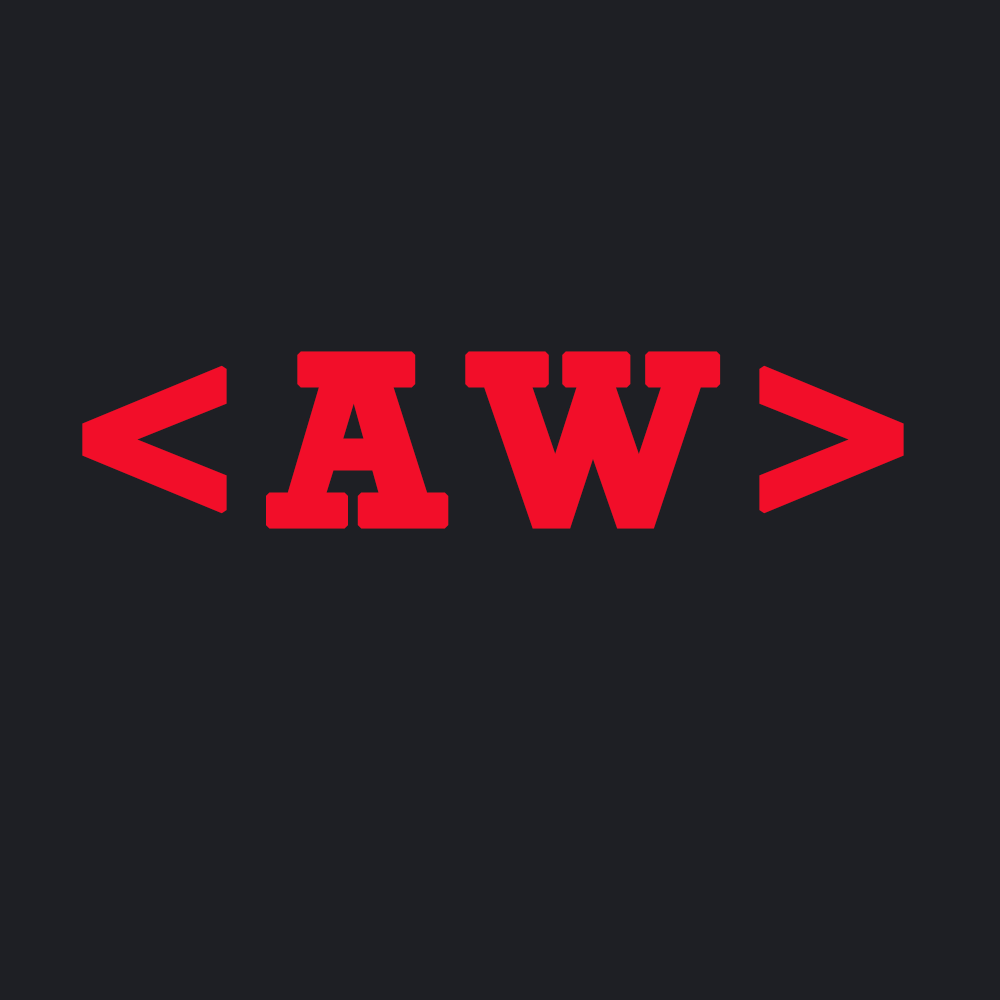
<style>
.page{position:relative;width:1000px;height:1000px;background:#1e1f24}
.page>*{position:absolute;margin:0}
.t1{font:250px "Rockwell-Bold";letter-spacing:0.1em;color:#f20e29;font-weight:bold}
</style>
<div class="page">
<p class="t1" style="left:82px;top:351px;width:822px;height:178px">&lt;AW&gt;</p>
</div>
